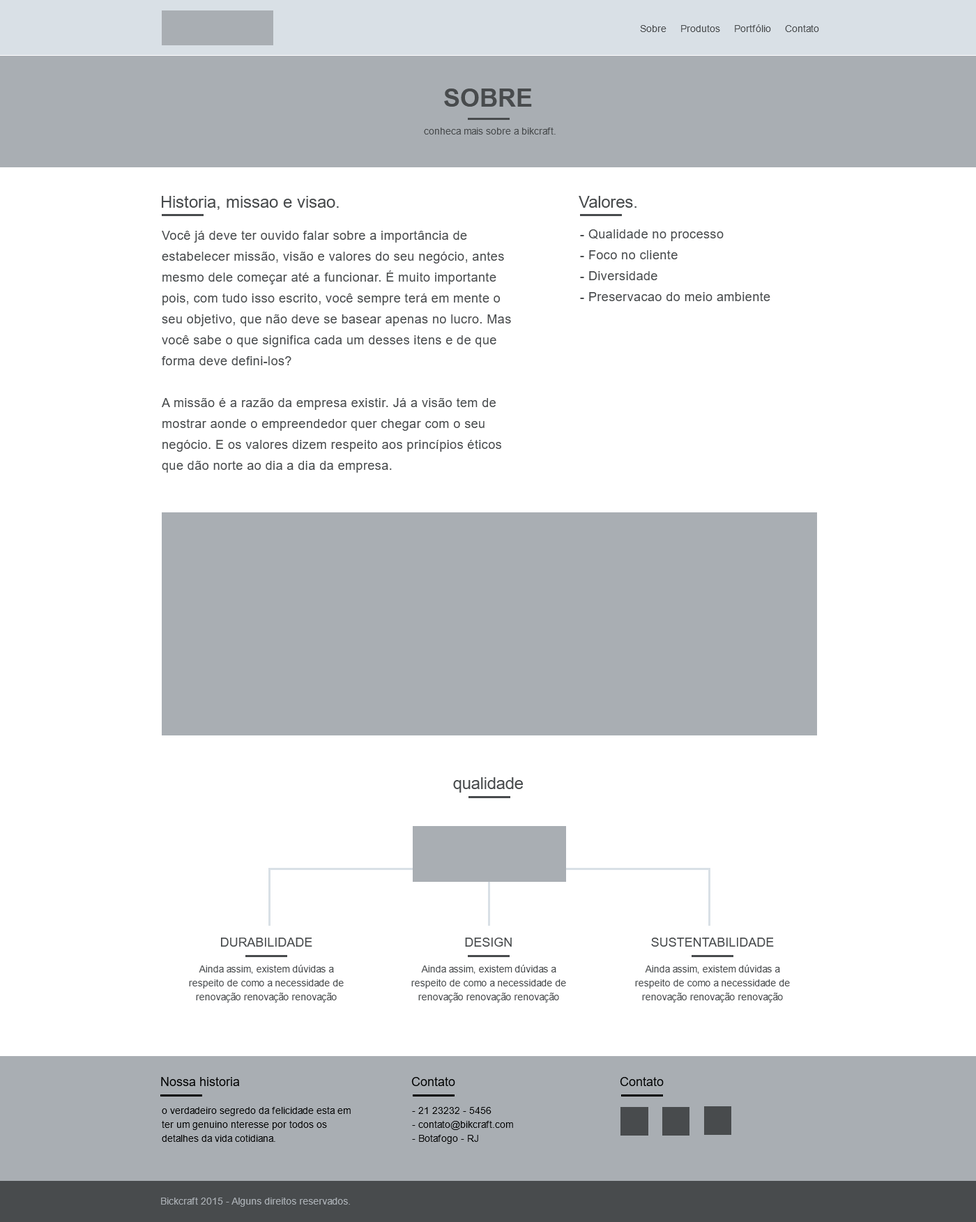
<style>
.page{position:relative;width:976px;height:1222px;background:#ffffff}
.page>*{position:absolute;margin:0}
.t1{font:9.8px "ArialMT";color:#484b4d}
.t2{font:25.1px "Arial-BoldMT";color:#484b4d;text-transform:uppercase}
.t3{font:16.7px "ArialMT";color:#484b4d}
.t4{font:12.5px/20.9px "ArialMT";letter-spacing:0.025em;color:#484b4d}
.t5{font:12.5px "ArialMT";color:#484b4d}
.t6{font:9.8px/13.9px "ArialMT";color:#484b4d}
.t7{font:12.5px "ArialMT";color:#000101}
.t8{font:9.8px/13.9px "ArialMT";color:#000000}
.t9{font:9.8px "ArialMT";color:#a9aeb3}
</style>
<div class="page">
<p class="t1" style="left:640px;top:24px;width:179px;height:8px">Sobre     Produtos     Portfólio     Contato</p>
<p class="t2" style="left:444px;top:89px;width:88px;height:18px">Sobre</p>
<p class="t1" style="left:424px;top:128px;width:132px;height:7px">conheca mais sobre a bikcraft.</p>
<p class="t3" style="left:162px;top:196px;width:177px;height:14px">Historia, missao e visao.</p>
<p class="t3" style="left:579px;top:196px;width:57px;height:12px">Valores.</p>
<p class="t4" style="left:162px;top:231px;width:349px;height:242px">Você já deve ter ouvido falar sobre a importância de estabelecer missão, visão e valores do seu negócio, antes mesmo dele começar até a funcionar. É muito importante pois, com tudo isso escrito, você sempre terá em mente o seu objetivo, que não deve se basear apenas no lucro. Mas você sabe o que significa cada um desses itens e de que forma deve defini-los?<br><br>A missão é a razão da empresa existir. Já a visão tem de mostrar aonde o empreendedor quer chegar com o seu negócio. E os valores dizem respeito aos princípios éticos que dão norte ao dia a dia da empresa.</p>
<p class="t4" style="left:580px;top:229px;width:190px;height:72px">- Qualidade no processo<br>- Foco no cliente<br>- Diversidade<br>- Preservacao do meio ambiente</p>
<p class="t3" style="left:453px;top:777px;width:70px;height:16px">qualidade</p>
<p class="t5" style="left:221px;top:938px;width:91px;height:9px">DURABILIDADE</p>
<p class="t5" style="left:465px;top:938px;width:47px;height:9px">DESIGN</p>
<p class="t5" style="left:651px;top:938px;width:123px;height:9px">SUSTENTABILIDADE</p>
<p class="t6" style="left:189px;top:965px;width:155px;height:37px;text-align:center">Ainda assim, existem dúvidas a respeito de como a necessidade de renovação renovação renovação</p>
<p class="t6" style="left:411px;top:965px;width:155px;height:37px;text-align:center">Ainda assim, existem dúvidas a respeito de como a necessidade de renovação renovação renovação</p>
<p class="t6" style="left:635px;top:965px;width:155px;height:37px;text-align:center">Ainda assim, existem dúvidas a respeito de como a necessidade de renovação renovação renovação</p>
<p class="t7" style="left:161px;top:1077px;width:79px;height:9px">Nossa historia</p>
<p class="t7" style="left:411px;top:1077px;width:44px;height:9px">Contato</p>
<p class="t7" style="left:620px;top:1077px;width:44px;height:9px">Contato</p>
<p class="t8" style="left:162px;top:1107px;width:189px;height:35px">o verdadeiro segredo da felicidade esta em ter um genuino nteresse por todos os detalhes da vida cotidiana.</p>
<p class="t8" style="left:412px;top:1107px;width:101px;height:37px">- 21 23232 - 5456<br>- contato@bikcraft.com<br>- Botafogo - RJ</p>
<p class="t9" style="left:161px;top:1198px;width:189px;height:9px">Bickcraft 2015 - Alguns direitos reservados.</p>
</div>
